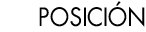
<style>
.page{position:relative;width:146px;height:32px;background:#ffffff}
.page>*{position:absolute;margin:0}
.t1{font:24.7px "Futura-Book";color:#000000;scale:0.91 1}
</style>
<div class="page">
<p class="t1" style="left:39px;top:1px;width:106px;height:26px">POSICIÓN</p>
</div>
